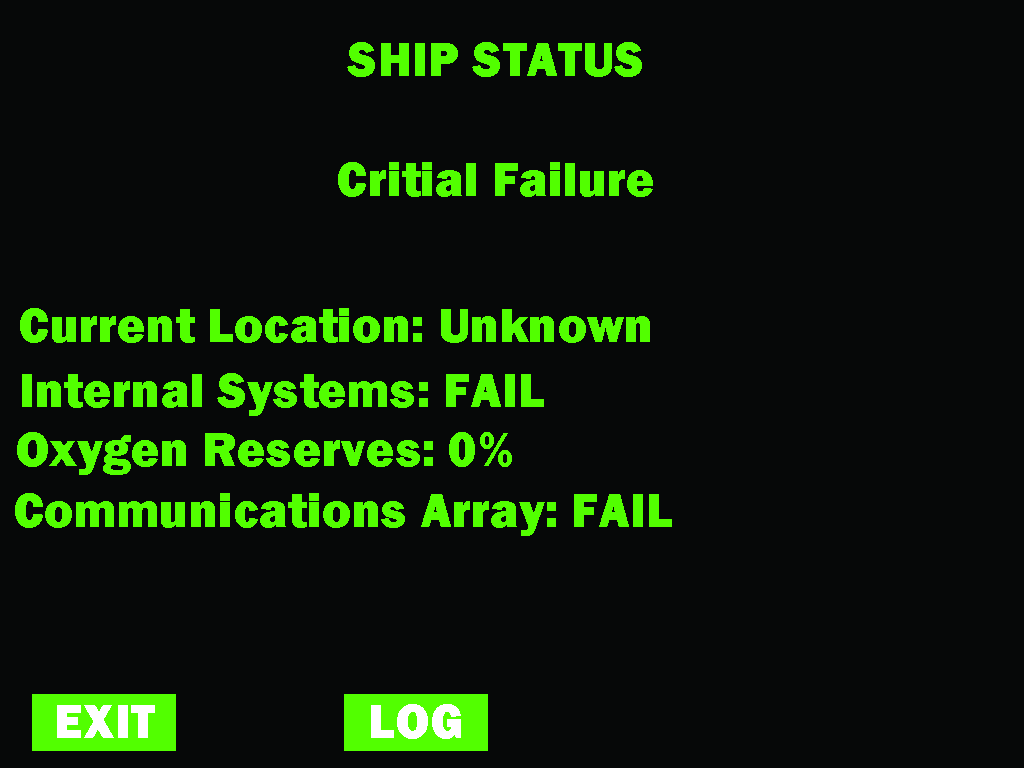
<style>
.page{position:relative;width:1024px;height:768px;background:#060808}
.page>*{position:absolute;margin:0}
.t1{font:50px "FranklinGothic-Heavy";color:#52ff00}
.t2{font:50px "FranklinGothic-Heavy";color:#ffffff}
</style>
<div class="page">
<p class="t1" style="left:338px;top:42px;width:315px;height:155px;text-align:center">SHIP STATUS<br><br>Critial Failure</p>
<p class="t1" style="left:20px;top:308px;width:630px;height:35px">Current Location: Unknown</p>
<p class="t1" style="left:22px;top:373px;width:522px;height:43px">Internal Systems: FAIL</p>
<p class="t1" style="left:17px;top:432px;width:495px;height:43px">Oxygen Reserves: 0%</p>
<p class="t1" style="left:15px;top:493px;width:657px;height:43px">Communications Array: FAIL</p>
<p class="t2" style="left:57px;top:705px;width:98px;height:33px">EXIT</p>
<p class="t2" style="left:371px;top:704px;width:90px;height:35px">LOG</p>
</div>
